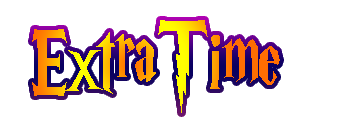
<style>
.page{position:relative;width:338px;height:135px;background:#ffffff}
.page>*{position:absolute;margin:0}
.t1{font:95.1px "HarryP";scale:0.86 1}
</style>
<div class="page">
<p class="t1" style="left:32px;top:20px;width:248px;height:93px">ExtraTime</p>
</div>
